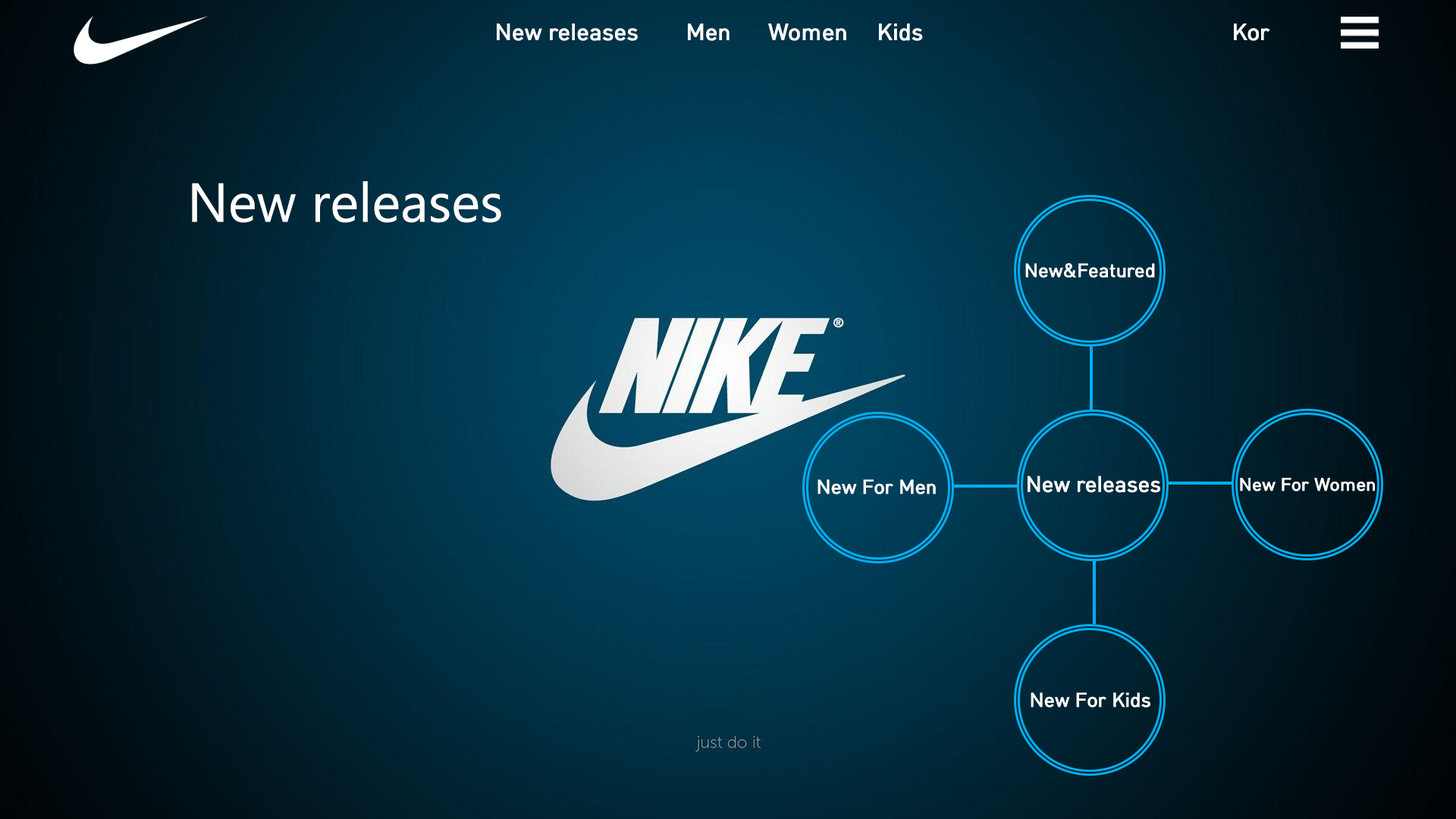
<style>
.page{position:relative;width:1456px;height:819px}
.page>*{position:absolute;margin:0}
.t1{font:22.7px "HCRDotum-Bold";color:#ffffff}
.t2{font:54.6px "Gadugi";color:#ffffff}
.t3{font:18.6px "HCRDotum-Bold";color:#ffffff}
.t4{font:19.2px "HCRDotum-Bold";color:#ffffff}
.t5{font:21.6px "HCRDotum-Bold";color:#ffffff}
.t6{font:17.4px "HCRDotum-Bold";color:#ffffff}
</style>
<div class="page">
<p class="t1" style="left:497px;top:24px;width:773px;height:17px">New releases  Men  Women  Kids            Kor</p>
<p class="t2" style="left:192px;top:181px;width:309px;height:42px">New releases</p>
<p class="t3" style="left:1025px;top:263px;width:130px;height:15px">New&amp;Featured</p>
<p class="t4" style="left:817px;top:479px;width:119px;height:15px">New For Men</p>
<p class="t5" style="left:1028px;top:475px;width:132px;height:18px">New releases</p>
<p class="t6" style="left:1240px;top:478px;width:135px;height:13px">New For Women</p>
<p class="t4" style="left:1031px;top:692px;width:119px;height:16px">New For Kids</p>
</div>
